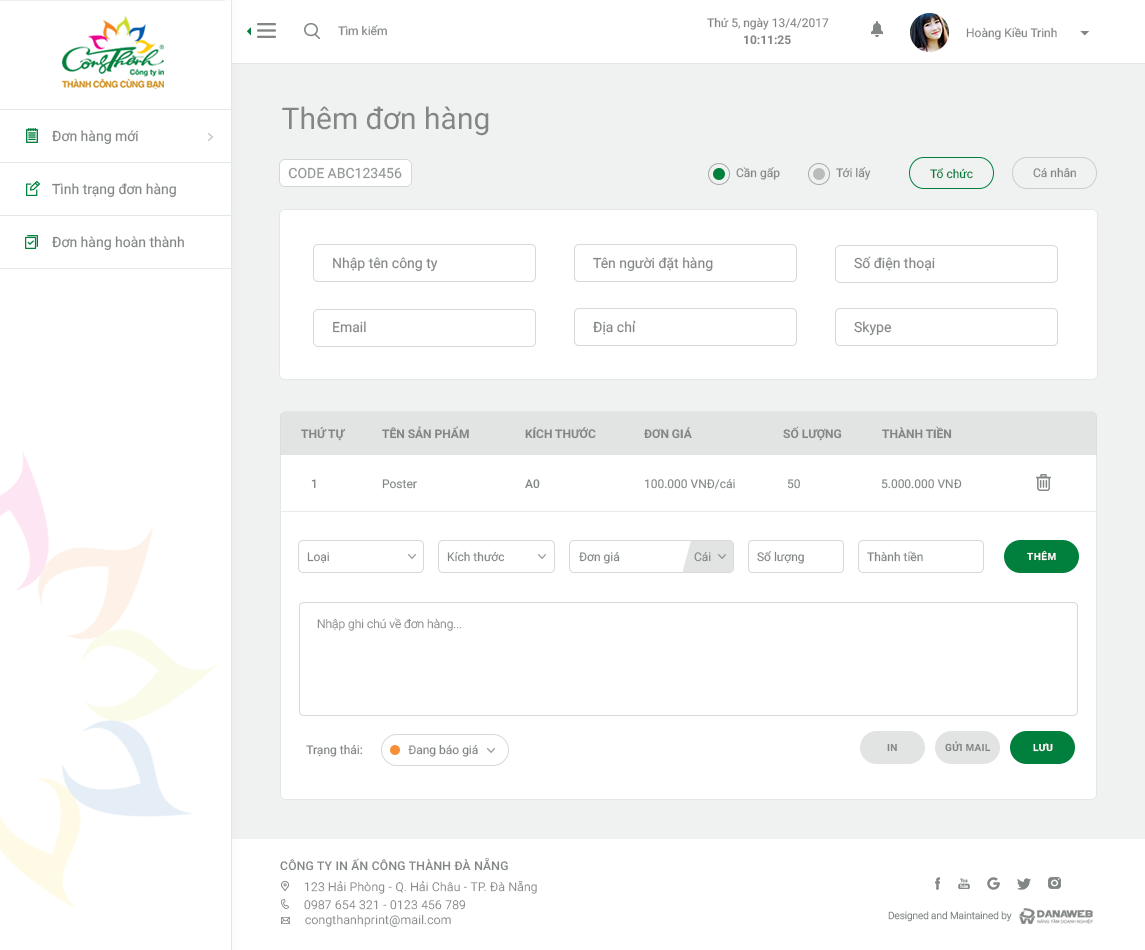
<style>
.page{position:relative;width:1145px;height:950px;background:#ffffff}
.page>*{position:absolute;margin:0}
.t1{font:12px "Roboto-Regular";color:#828785}
.t2{font:12px "Roboto-Bold";color:#828785}
.t3{font:30px "Roboto-Regular";color:#828785}
.t4{font:14px "Roboto-Regular";color:#828785}
.t5{font:14px "Roboto-Regular";color:#939895}
.t6{font:12px "Roboto-Regular";color:#007f3d}
.t7{font:12px "Roboto-Regular";color:#6f7472}
.t8{font:14px "Roboto-Regular";color:#6f7472}
.t9{font:12px "Roboto-Bold";color:#6f7472}
.t10{font:12px "Roboto-Bold";color:#717372}
.t11{font:12px "Roboto-Medium";color:#868b89}
.t12{font:10px "Roboto-Bold";letter-spacing:0.05em;color:#ffffff}
.t13{font:12px "Roboto-Light"}
.t14{font:10px "Roboto-Bold";letter-spacing:0.025em;color:#828785}
.t15{font:10px "Roboto-Bold";letter-spacing:0.025em;color:#ffffff}
.t16{font:12px "Roboto-Medium";letter-spacing:0.025em;color:#6f7472}
.t17{font:12px "Roboto-Light";letter-spacing:0.025em}
.t18{font:10px "Roboto-Light";color:#868786}
</style>
<div class="page">
<p class="t1" style="left:707px;top:17px;width:122px;height:13px">Thứ 5, ngày 13/4/2017</p>
<p class="t1" style="left:338px;top:25px;width:49px;height:11px">Tìm kiếm</p>
<p class="t1" style="left:966px;top:27px;width:91px;height:13px">Hoàng Kiều Trinh</p>
<p class="t2" style="left:743px;top:35px;width:48px;height:10px">10:11:25</p>
<p class="t3" style="left:282px;top:106px;width:207px;height:30px">Thêm đơn hàng</p>
<p class="t4" style="left:52px;top:130px;width:86px;height:15px">Đơn hàng mới</p>
<p class="t5" style="left:288px;top:167px;width:114px;height:12px">CODE ABC123456</p>
<p class="t1" style="left:736px;top:167px;width:44px;height:13px">Cần gấp</p>
<p class="t1" style="left:836px;top:167px;width:35px;height:13px">Tới lấy</p>
<p class="t6" style="left:930px;top:167px;width:43px;height:12px">Tổ chức</p>
<p class="t7" style="left:1033px;top:167px;width:43px;height:11px">Cá nhân</p>
<p class="t4" style="left:52px;top:183px;width:124px;height:15px">Tình trạng đơn hàng</p>
<p class="t4" style="left:52px;top:236px;width:132px;height:15px">Đơn hàng hoàn thành</p>
<p class="t4" style="left:333px;top:257px;width:105px;height:15px">Nhập tên công ty</p>
<p class="t8" style="left:593px;top:257px;width:120px;height:15px">Tên người đặt hàng</p>
<p class="t4" style="left:854px;top:256px;width:81px;height:15px">Số điện thoại</p>
<p class="t8" style="left:333px;top:321px;width:33px;height:12px">Email</p>
<p class="t4" style="left:593px;top:320px;width:43px;height:15px">Địa chỉ</p>
<p class="t4" style="left:854px;top:321px;width:38px;height:15px">Skype</p>
<p class="t9" style="left:301px;top:426px;width:45px;height:15px">THỨ TỰ</p>
<p class="t9" style="left:382px;top:426px;width:87px;height:13px">TÊN SẢN PHẨM</p>
<p class="t10" style="left:525px;top:427px;width:71px;height:12px">KÍCH THƯỚC</p>
<p class="t10" style="left:644px;top:427px;width:48px;height:12px">ĐƠN GIÁ</p>
<p class="t10" style="left:783px;top:426px;width:59px;height:15px">SỐ LƯỢNG</p>
<p class="t10" style="left:882px;top:426px;width:70px;height:13px">THÀNH TIỀN</p>
<p class="t7" style="left:311px;top:479px;width:5px;height:10px">1</p>
<p class="t1" style="left:382px;top:479px;width:35px;height:10px">Poster</p>
<p class="t11" style="left:525px;top:479px;width:15px;height:10px">A0</p>
<p class="t1" style="left:644px;top:478px;width:91px;height:11px">100.000 VNĐ/cái</p>
<p class="t1" style="left:787px;top:479px;width:13px;height:10px">50</p>
<p class="t1" style="left:881px;top:479px;width:81px;height:10px">5.000.000 VNĐ</p>
<p class="t7" style="left:307px;top:552px;width:22px;height:12px">Loại</p>
<p class="t1" style="left:447px;top:551px;width:58px;height:11px">Kích thước</p>
<p class="t1" style="left:579px;top:551px;width:41px;height:13px">Đơn giá</p>
<p class="t1" style="left:694px;top:551px;width:17px;height:11px">Cái</p>
<p class="t1" style="left:757px;top:551px;width:47px;height:13px">Số lượng</p>
<p class="t7" style="left:867px;top:551px;width:56px;height:11px">Thành tiền</p>
<p class="t12" style="left:1027px;top:550px;width:29px;height:11px">THÊM</p>
<p class="t13" style="left:317px;top:618px;width:144px;height:13px">Nhập ghi chú về đơn hàng...</p>
<p class="t1" style="left:306px;top:744px;width:57px;height:13px">Trạng thái:</p>
<p class="t1" style="left:408px;top:744px;width:70px;height:13px">Đang báo giá</p>
<p class="t14" style="left:887px;top:743px;width:10px;height:9px">IN</p>
<p class="t14" style="left:945px;top:741px;width:46px;height:11px">GỬI MAIL</p>
<p class="t15" style="left:1033px;top:743px;width:20px;height:9px">LƯU</p>
<p class="t16" style="left:280px;top:858px;width:228px;height:13px">CÔNG TY IN ẤN CÔNG THÀNH ĐÀ NẴNG</p>
<p class="t17" style="left:304px;top:880px;width:233px;height:14px">123 Hải Phòng - Q. Hải Châu - TP. Đà Nẵng</p>
<p class="t17" style="left:304px;top:900px;width:162px;height:10px">0987 654 321 - 0123 456 789</p>
<p class="t17" style="left:305px;top:914px;width:146px;height:13px">congthanhprint@mail.com</p>
<p class="t18" style="left:888px;top:911px;width:124px;height:11px">Designed and Maintained by</p>
</div>
